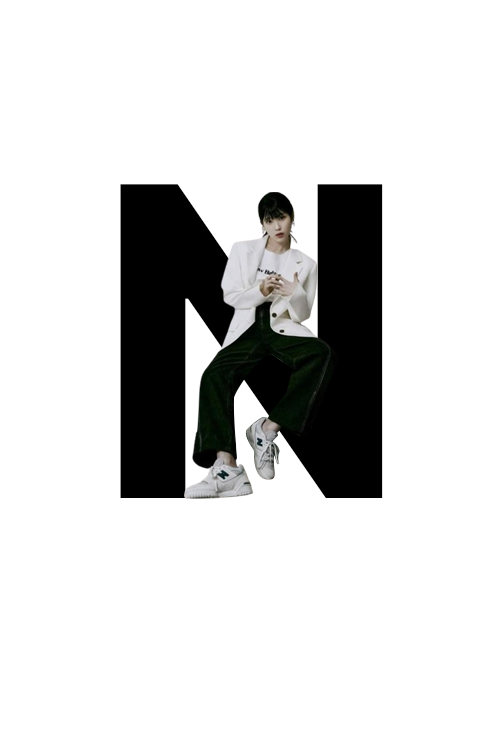
<style>
.page{position:relative;width:500px;height:750px;background:#ffffff}
.page>*{position:absolute;margin:0}
.t1{font:443.7px "Pretendard-Bold";color:#000000}
</style>
<div class="page">
<p class="t1" style="left:120px;top:184px;width:263px;height:314px">N</p>
</div>
